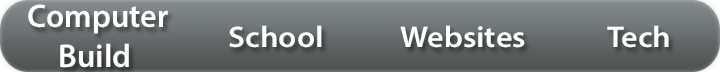
<style>
.page{position:relative;width:720px;height:72px}
.page>*{position:absolute;margin:0}
.t1{font:32.8px "MyriadPro-Semibold";color:#ffffff}
.t2{font:30px "MyriadPro-Semibold";color:#ffffff;scale:1.08 1}
</style>
<div class="page">
<p class="t1" style="left:28px;top:4px;width:140px;height:64px;text-align:center">Computer<br>Build</p>
<p class="t2" style="left:229px;top:25px;width:93px;height:23px">School</p>
<p class="t2" style="left:400px;top:25px;width:125px;height:23px">Websites</p>
<p class="t2" style="left:607px;top:25px;width:62px;height:23px">Tech</p>
</div>
